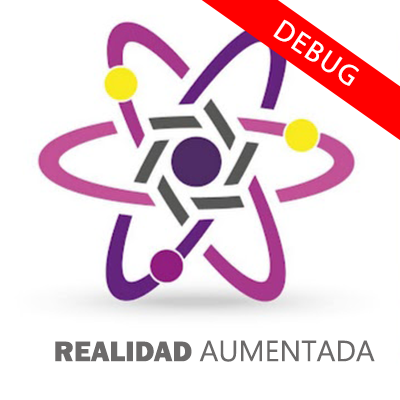
<style>
.page{position:relative;width:400px;height:400px;background:#ffffff}
.page>*{position:absolute;margin:0}
.t1{font:29.2px "MyriadPro-Regular";letter-spacing:0.06em;color:#ffffff}
.t2{font:29.2px "Ebrima";color:#6c6a6a}
.t3{font:29.2px "FranklinGothic-Heavy";color:#6c6a6a}
</style>
<div class="page">
<p class="t1" style="left:273px;top:19px;width:86px;height:67px;rotate:34deg">DEBUG</p>
<p class="t2" style="left:55px;top:340px;width:320px;height:22px"><span class="t3">REALIDAD </span>AUMENTADA</p>
</div>
